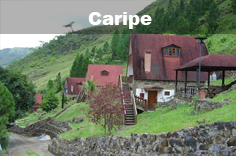
<style>
.page{position:relative;width:236px;height:156px}
.page>*{position:absolute;margin:0}
.t1{font:18px "Arial-Black";color:#ffffff}
</style>
<div class="page">
<p class="t1" style="left:88px;top:12px;width:64px;height:17px">Caripe</p>
</div>
